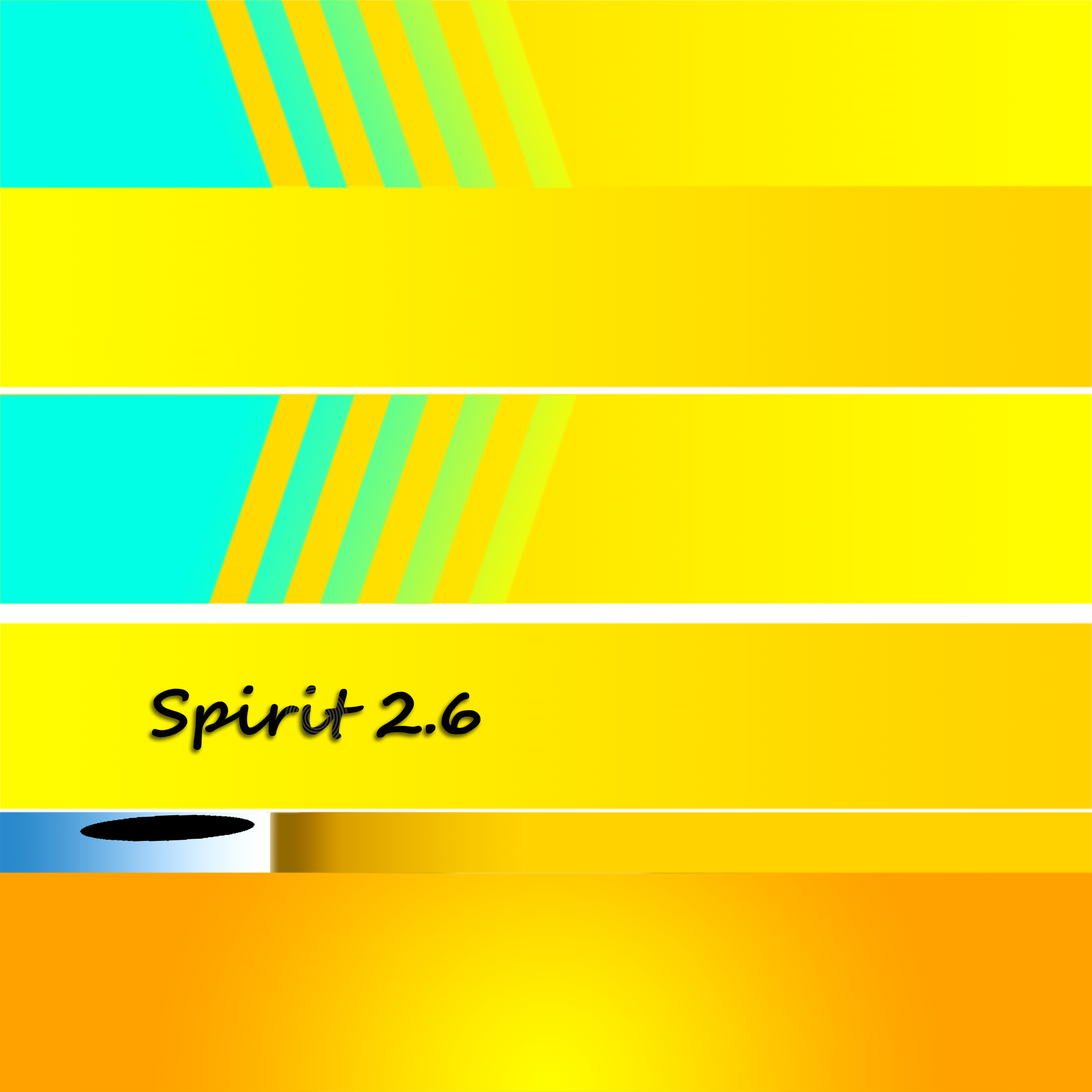
<style>
.page{position:relative;width:1092px;height:1092px}
.page>*{position:absolute;margin:0}
.t1{font:64px "SegoeScript-Bold";color:#000000}
</style>
<div class="page">
<p class="t1" style="left:151px;top:685px;width:329px;height:65px">Spirit 2.6</p>
</div>
